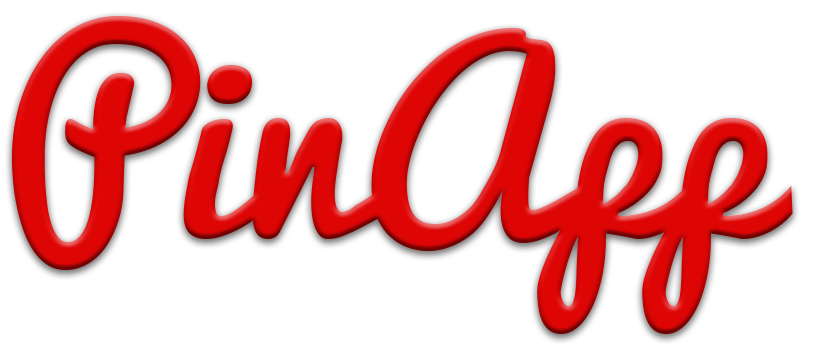
<style>
.page{position:relative;width:819px;height:355px;background:#ffffff}
.page>*{position:absolute;margin:0}
.t1{font:250px "Pacifico";color:#de0505}
</style>
<div class="page">
<p class="t1" style="left:11px;top:16px;width:782px;height:318px">PinApp</p>
</div>
